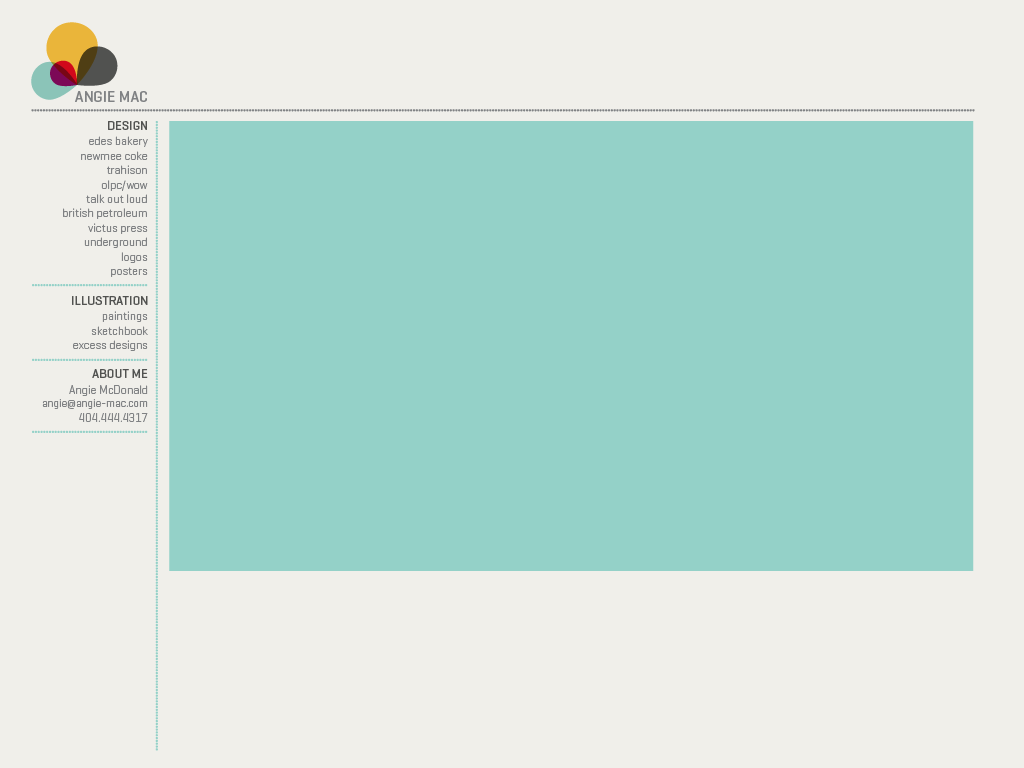
<style>
.page{position:relative;width:1024px;height:768px;background:#f0efea}
.page>*{position:absolute;margin:0}
.t1{font:16px "Geogrotesque-Medium";color:#808284}
.t2{font:13px "Geogrotesque-Medium";color:#565757}
.t3{font:12px "Geogrotesque-Light";color:#808284}
.t4{font:11px "Geogrotesque-Light";color:#808284}
</style>
<div class="page">
<p class="t1" style="left:75px;top:91px;width:72px;height:11px">ANGIE MAC</p>
<p class="t2" style="left:108px;top:121px;width:39px;height:9px">DESIGN</p>
<p class="t3" style="left:63px;top:136px;width:85px;height:141px;text-align:right">edes bakery<br>newmee coke<br>trahison<br>olpc/wow<br>talk out loud<br>british petroleum<br>victus press<br>underground<br>logos<br>posters</p>
<p class="t2" style="left:72px;top:296px;width:76px;height:9px">ILLUSTRATION</p>
<p class="t3" style="left:73px;top:311px;width:75px;height:40px;text-align:right">paintings<br>sketchbook<br>excess designs</p>
<p class="t2" style="left:92px;top:369px;width:56px;height:9px">ABOUT ME</p>
<p class="t4" style="left:42px;top:385px;width:106px;height:37px;text-align:right"><span class="t3">Angie McDonald<br></span>angie@angie-mac.com<br><span class="t3">404.444.4317</span></p>
</div>
